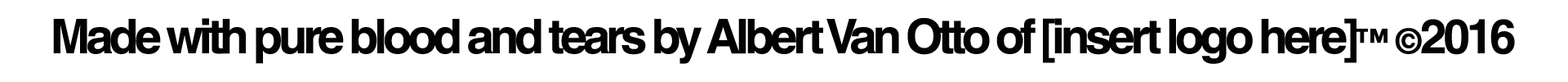
<style>
.page{position:relative;width:1568px;height:82px;background:#ffffff}
.page>*{position:absolute;margin:0}
.t1{font:47.6px "HelveticaWorld-Bold";letter-spacing:-0.09em;color:#020202}
.t2{font:34px "HelveticaWorld-Bold";letter-spacing:-0.09em;color:#020202}
</style>
<div class="page">
<p class="t1" style="left:53px;top:18px;width:1462px;height:46px">Made with pure blood and tears by Albert Van Otto of [insert logo here]<span class="t2">™ ©</span>2016</p>
</div>
